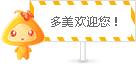
<style>
.page{position:relative;width:136px;height:65px;background:#ffffff}
.page>*{position:absolute;margin:0}
.t1{font:12px "MicrosoftYaHei";color:#666666}
</style>
<div class="page">
<p class="t1" style="left:51px;top:16px;width:66px;height:11px">多美欢迎您！</p>
</div>
